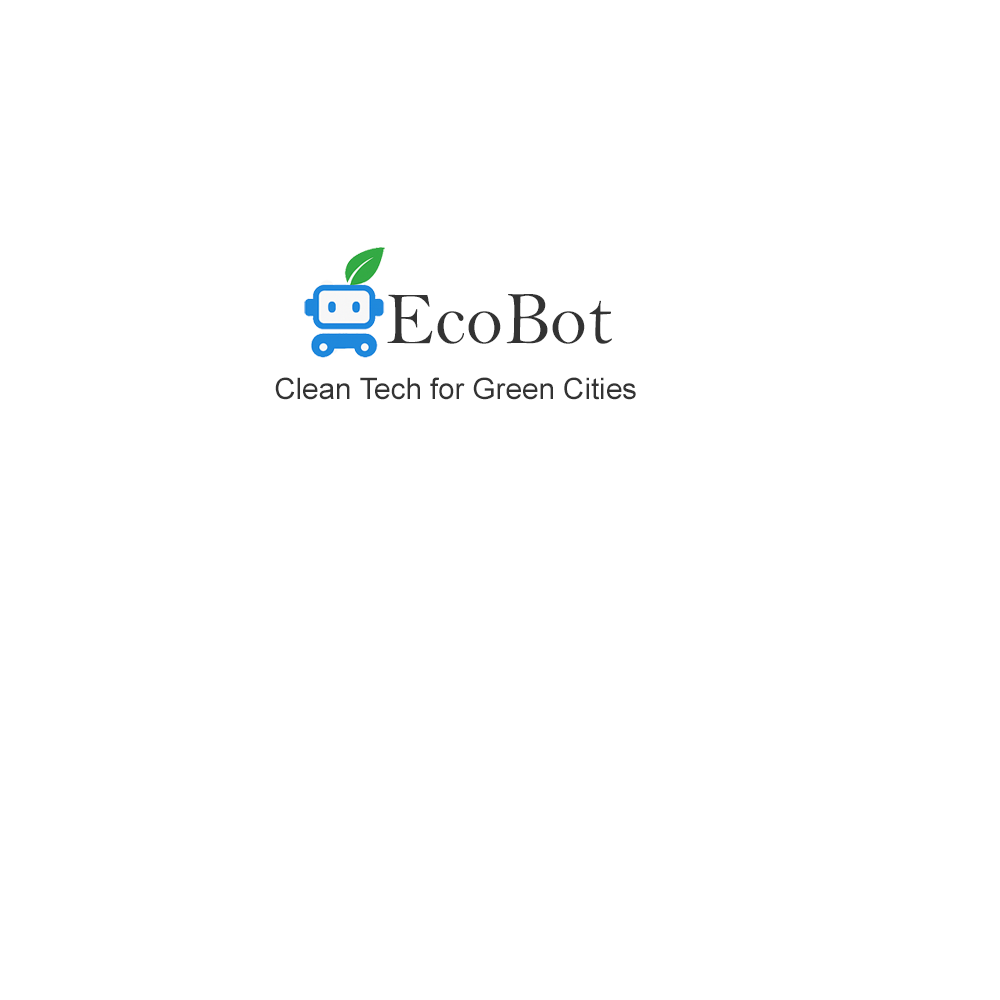
<style>
.page{position:relative;width:1000px;height:1000px;background:#ffffff}
.page>*{position:absolute;margin:0}
.t1{font:75.7px "BellMT";color:#333333}
.t2{font:29.6px "ArialMT";color:#333333}
</style>
<div class="page">
<p class="t1" style="left:387px;top:294px;width:225px;height:50px">EcoBot</p>
<p class="t2" style="left:275px;top:377px;width:361px;height:23px">Clean Tech for Green Cities</p>
</div>
